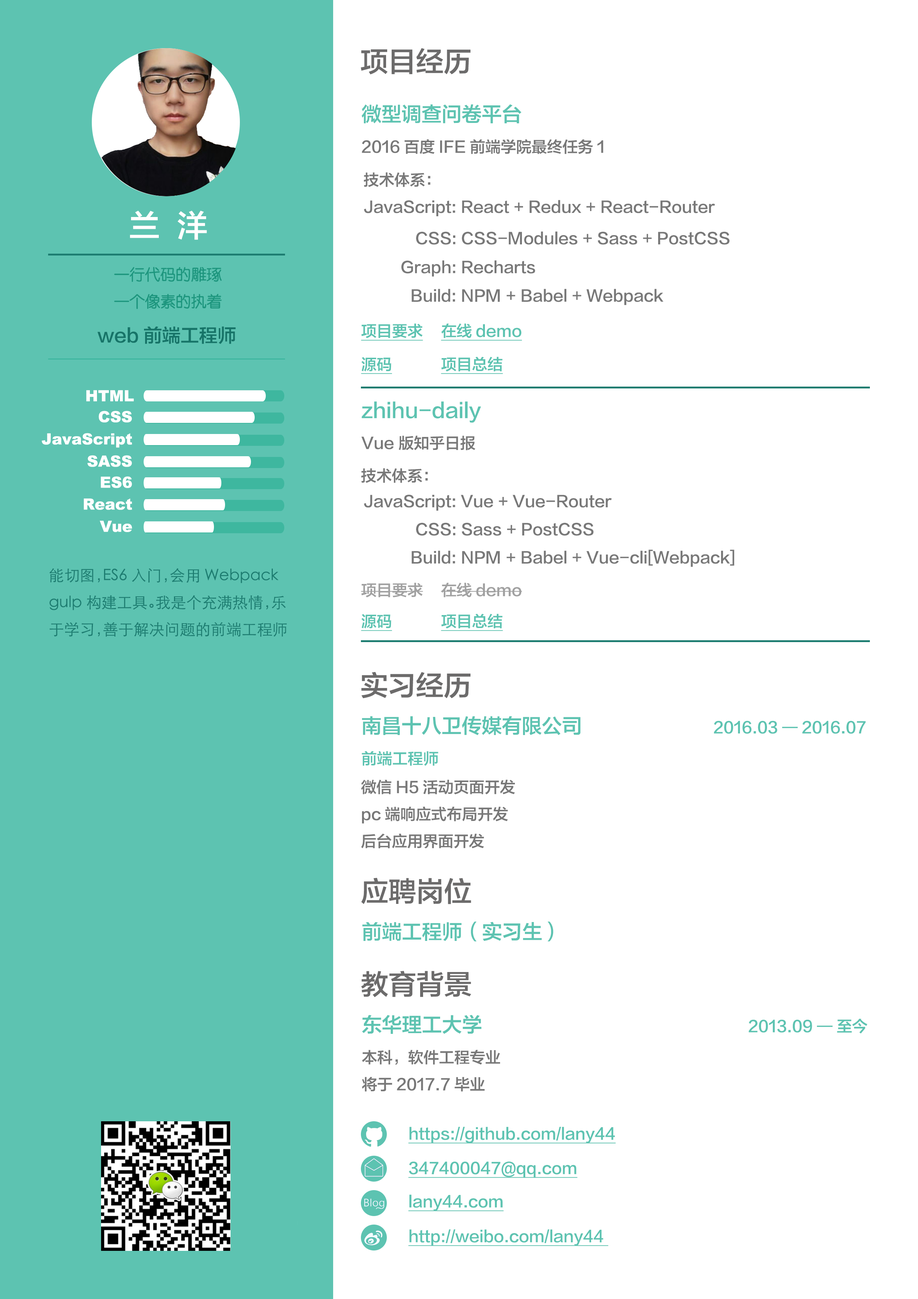
<style>
.page{position:relative;width:918px;height:1299px;background:#ffffff}
.page>*{position:absolute;margin:0}
.t1{font:27.8px "FZLTZHK--GBK1-0";color:#6c6b6b}
.t2{font:15.4px "FZLTZHK--GBK1-0";color:#787878}
.t3{font:20.1px "FZLTZHK--GBK1-0";color:#5dc3b1}
.t4{font:30.9px "FZLTZHK--GBK1-0";color:#ffffff}
.t5{font:15.4px "STYuanti-TC-Regular";color:#1d967e}
.t6{font:18.5px "FZLTZHK--GBK1-0";color:#167468}
.t7{font:15.4px "FZLTZHK--GBK1-0";color:#5dc3b1;text-decoration:underline}
.t8{font:15.4px "Arial-Black";color:#ffffff}
.t9{font:15.4px "STHeitiSC-Light";color:#1d7d71}
.t10{font:15.4px "FZLTZHK--GBK1-0";color:#a1a1a1}
.t11{font:15.4px "FZLTZHK--GBK1-0";color:#5dc3b1}
</style>
<div class="page">
<p class="t1" style="left:361px;top:48px;width:110px;height:26px">项目经历</p>
<p class="t2" style="left:362px;top:104px;width:241px;height:50px"><span class="t3">微型调查问卷平台        <br></span>2016百度IFE前端学院最终任务1</p>
<p class="t2" style="left:364px;top:172px;width:67px;height:15px">技术体系：</p>
<p class="t2" style="left:364px;top:200px;width:351px;height:16px">JavaScript: React + Redux + React-Router</p>
<p class="t4" style="left:130px;top:211px;width:77px;height:29px">兰  洋</p>
<p class="t2" style="left:416px;top:231px;width:314px;height:14px">CSS: CSS-Modules + Sass + PostCSS</p>
<p class="t5" style="left:114px;top:267px;width:108px;height:42px">一行代码的雕琢<br>一个像素的执着</p>
<p class="t2" style="left:401px;top:260px;width:134px;height:17px">Graph: Recharts</p>
<p class="t2" style="left:412px;top:289px;width:251px;height:16px">Build: NPM + Babel + Webpack</p>
<p class="t6" style="left:97px;top:326px;width:139px;height:18px">web前端工程师</p>
<p class="t7" style="left:361px;top:323px;width:161px;height:18px">项目要求  在线demo</p>
<p class="t7" style="left:361px;top:357px;width:142px;height:17px">源码     项目总结</p>
<p class="t8" style="left:86px;top:390px;width:48px;height:11px">HTML</p>
<p class="t3" style="left:361px;top:401px;width:120px;height:49px">zhihu-daily        <br><span class="t2">Vue 版知乎日报</span></p>
<p class="t8" style="left:98px;top:411px;width:34px;height:11px">CSS</p>
<p class="t8" style="left:41px;top:433px;width:91px;height:15px">JavaScript</p>
<p class="t8" style="left:87px;top:455px;width:45px;height:12px">SASS</p>
<p class="t2" style="left:361px;top:468px;width:67px;height:15px">技术体系：</p>
<p class="t8" style="left:101px;top:476px;width:31px;height:12px">ES6</p>
<p class="t2" style="left:364px;top:495px;width:248px;height:16px">JavaScript: Vue + Vue-Router</p>
<p class="t8" style="left:84px;top:498px;width:48px;height:12px">React</p>
<p class="t8" style="left:100px;top:521px;width:32px;height:11px">Vue</p>
<p class="t2" style="left:416px;top:522px;width:178px;height:14px">CSS: Sass + PostCSS</p>
<p class="t2" style="left:412px;top:549px;width:323px;height:18px">Build: NPM + Babel + Vue-cli[Webpack]</p>
<p class="t9" style="left:49px;top:568px;width:238px;height:69px">能切图，ES6入门，会用Webpack<br>gulp构建工具。我是个充满热情，乐<br>于学习，善于解决问题的前端工程师</p>
<p class="t10" style="left:361px;top:582px;width:161px;height:15px">项目要求  在线demo</p>
<p class="t7" style="left:361px;top:613px;width:142px;height:18px">源码     项目总结</p>
<p class="t1" style="left:361px;top:672px;width:110px;height:26px">实习经历</p>
<p class="t11" style="left:362px;top:716px;width:504px;height:50px"><span class="t3">南昌十八卫传媒有限公司           </span>2016.03 — 2016.07      <br>前端工程师</p>
<p class="t2" style="left:361px;top:779px;width:154px;height:69px">微信H5活动页面开发<br>pc端响应式布局开发<br>后台应用界面开发</p>
<p class="t1" style="left:361px;top:877px;width:110px;height:27px">应聘岗位</p>
<p class="t3" style="left:362px;top:921px;width:191px;height:20px">前端工程师（实习生）</p>
<p class="t1" style="left:361px;top:971px;width:110px;height:26px">教育背景</p>
<p class="t2" style="left:362px;top:1015px;width:505px;height:76px"><span class="t3">东华理工大学                     </span><span class="t11">2013.09 — 至今 <br></span>本科，软件工程专业<br>将于2017.7毕业</p>
<p class="t7" style="left:408px;top:1127px;width:208px;height:16px">https://github.com/lany44</p>
<p class="t7" style="left:408px;top:1161px;width:170px;height:17px">347400047@qq.com</p>
<p class="t7" style="left:408px;top:1194px;width:96px;height:17px">lany44.com</p>
<p class="t7" style="left:408px;top:1229px;width:201px;height:17px">http://weibo.com/lany44</p>
</div>
